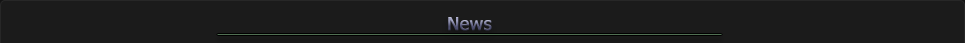
<style>
.page{position:relative;width:965px;height:43px;background:#1b1b1b}
.page>*{position:absolute;margin:0}
.t1{font:18px "Tahoma";font-weight:bold}
</style>
<div class="page">
<p class="t1" style="left:448px;top:17px;width:44px;height:14px">News</p>
</div>
